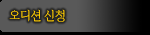
<style>
.page{position:relative;width:150px;height:35px;background:#595959}
.page>*{position:absolute;margin:0}
.t1{font:12px "TSThgrgl";color:#ffcc00;scale:0.94 1}
</style>
<div class="page">
<p class="t1" style="left:9px;top:9px;width:56px;height:13px">오디션 신청</p>
</div>
